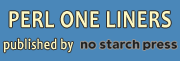
<style>
.page{position:relative;width:180px;height:61px;background:#4a87b9}
.page>*{position:absolute;margin:0}
.t1{font:25.2px "Candara-Bold";letter-spacing:0.04em;color:#fdf8c1;scale:0.8 1}
.t2{font:14.9px "Candara-Bold";letter-spacing:0.04em;color:#fdf8c1;scale:0.8 1}
</style>
<div class="page">
<p class="t1" style="left:9px;top:11px;width:162px;height:17px">PERL ONE LINERS</p>
<p class="t2" style="left:3px;top:38px;width:70px;height:15px">published by</p>
</div>
